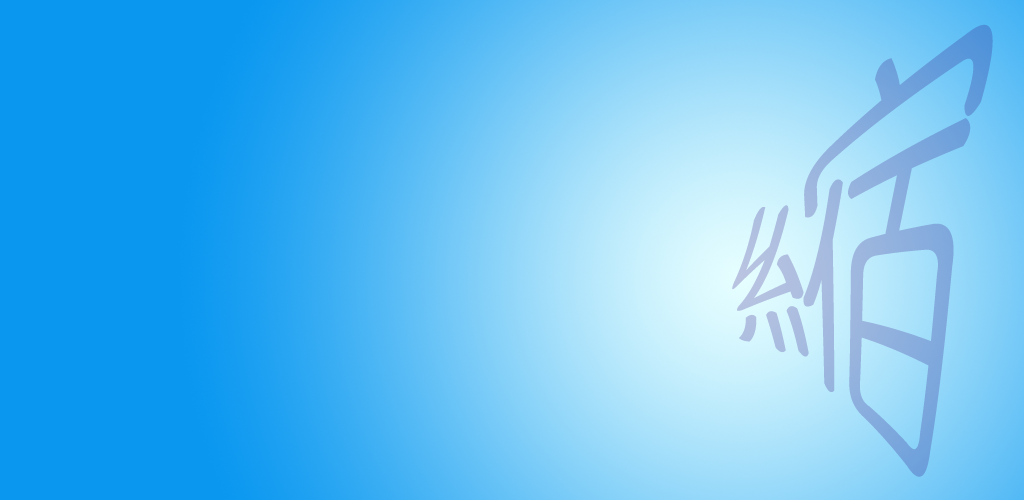
<style>
.page{position:relative;width:1024px;height:500px}
.page>*{position:absolute;margin:0}
.t1{font:395px "YouYuan";letter-spacing:0.05em;scale:0.55 1}
</style>
<div class="page">
<p class="t1" style="left:732px;top:24px;width:261px;height:453px;rotate:-2deg">縮</p>
</div>
